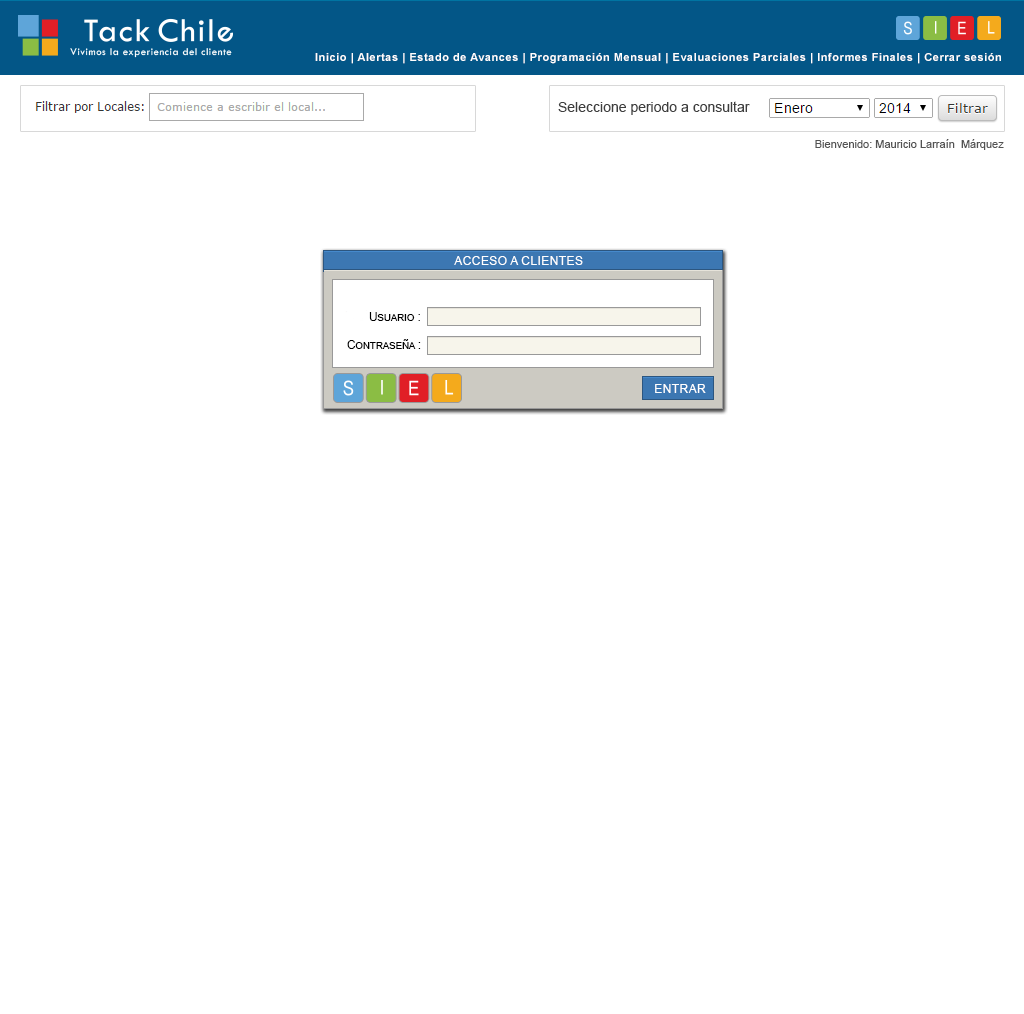
<style>
.page{position:relative;width:1024px;height:1014px;background:#ffffff}
.page>*{position:absolute;margin:0}
.t1{font:11px "Arial-BoldMT";letter-spacing:0.05em;color:#ffffff}
.t2{font:14px "ArialMT";color:#3e3e3e}
.t3{font:11px "ArialMT";color:#535353}
.t4{font:12px "ArialMT";color:#ffffff;text-transform:uppercase}
.t5{font:11.5px "ArialMT";color:#000000;font-variant:small-caps}
</style>
<div class="page">
<p class="t1" style="left:315px;top:53px;width:686px;height:11px">Inicio | Alertas | Estado de Avances | Programación Mensual | Evaluaciones Parciales | Informes Finales | Cerrar sesión</p>
<p class="t2" style="left:558px;top:101px;width:192px;height:14px">Seleccione periodo a consultar</p>
<p class="t3" style="left:815px;top:139px;width:189px;height:11px">Bienvenido: Mauricio Larraín  Márquez</p>
<p class="t4" style="left:454px;top:256px;width:129px;height:9px">acceso a clientes</p>
<p class="t5" style="left:369px;top:312px;width:51px;height:9px">Usuario :</p>
<p class="t5" style="left:347px;top:339px;width:74px;height:10px">Contraseña :</p>
<p class="t4" style="left:655px;top:384px;width:51px;height:9px">Entrar</p>
</div>
